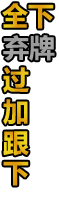
<style>
.page{position:relative;width:59px;height:200px;background:#ffffff}
.page>*{position:absolute;margin:0}
.t1{font:26px "MicrosoftYaHei-Bold";color:#e1a813}
.t2{font:26px "MicrosoftYaHei-Bold";color:#a7a7a7}
.t3{font:26px "MicrosoftYaHei-Bold"}
.t4{font:26px "MicrosoftYaHei-Bold";color:#dfa011}
</style>
<div class="page">
<p class="t1" style="left:2px;top:3px;width:52px;height:26px">全下</p>
<p class="t2" style="left:3px;top:35px;width:52px;height:26px">弃牌</p>
<p class="t3" style="left:3px;top:67px;width:26px;height:26px">过</p>
<p class="t3" style="left:3px;top:99px;width:25px;height:26px">加</p>
<p class="t3" style="left:3px;top:131px;width:26px;height:25px">跟</p>
<p class="t4" style="left:3px;top:161px;width:26px;height:25px">下</p>
</div>
